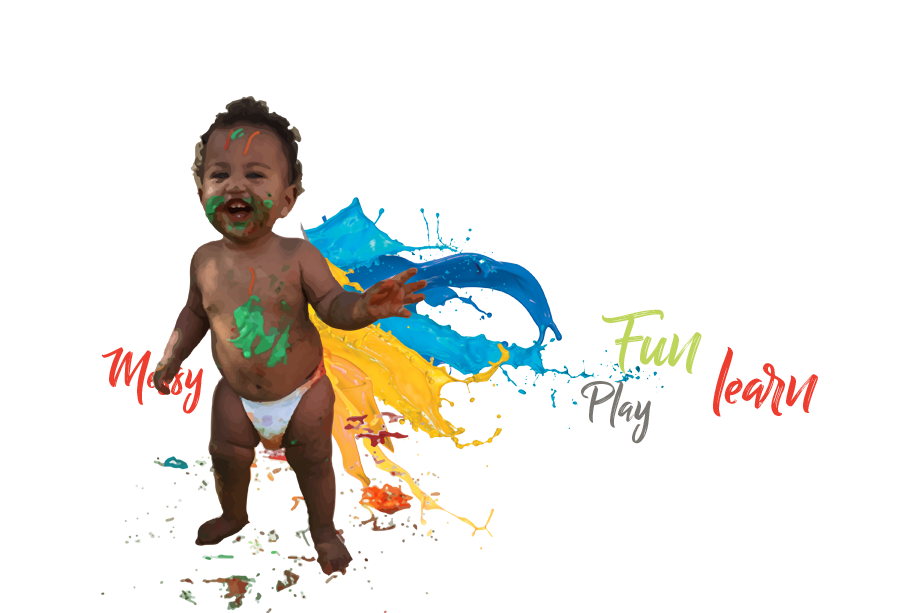
<style>
.page{position:relative;width:910px;height:613px;background:#ffffff}
.page>*{position:absolute;margin:0}
.t1{font:84.4px "BillyOhio";color:#bed55b}
.t2{font:57px "BillyOhio";color:#ed3d2f}
.t3{font:80.1px "BillyOhio";color:#ed3d2f}
.t4{font:53.8px "BillyOhio";color:#7a7772}
</style>
<div class="page">
<p class="t1" style="left:602px;top:309px;width:100px;height:65px">Fun</p>
<p class="t2" style="left:101px;top:347px;width:102px;height:67px">Messy</p>
<p class="t3" style="left:713px;top:347px;width:105px;height:70px">learn</p>
<p class="t4" style="left:581px;top:381px;width:70px;height:63px">Play</p>
</div>
